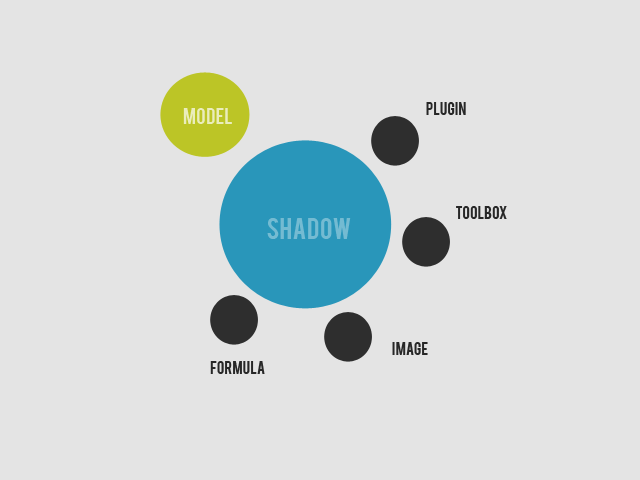
<style>
.page{position:relative;width:640px;height:480px;background:#e4e4e4}
.page>*{position:absolute;margin:0}
.t1{font:14px "Bebas";color:#272727}
.t2{font:18px "Bebas";color:#eaedbc}
.t3{font:24px "Bebas";color:#74bbd2}
</style>
<div class="page">
<p class="t1" style="left:426px;top:102px;width:40px;height:13px">plugin</p>
<p class="t2" style="left:183px;top:108px;width:49px;height:16px">model</p>
<p class="t1" style="left:456px;top:206px;width:51px;height:13px">Toolbox</p>
<p class="t3" style="left:267px;top:218px;width:84px;height:21px">shadow</p>
<p class="t1" style="left:392px;top:342px;width:36px;height:13px">image</p>
<p class="t1" style="left:210px;top:361px;width:55px;height:13px">formula</p>
</div>
